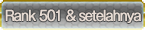
<style>
.page{position:relative;width:145px;height:30px}
.page>*{position:absolute;margin:0}
.t1{font:14px "GothicMB101Pro-Regular";letter-spacing:-0.08em;color:#e6dad2;font-weight:bold;scale:0.9 1}
</style>
<div class="page">
<p class="t1" style="left:5px;top:9px;width:136px;height:14px">Rank 501 &amp; setelahnya</p>
</div>
